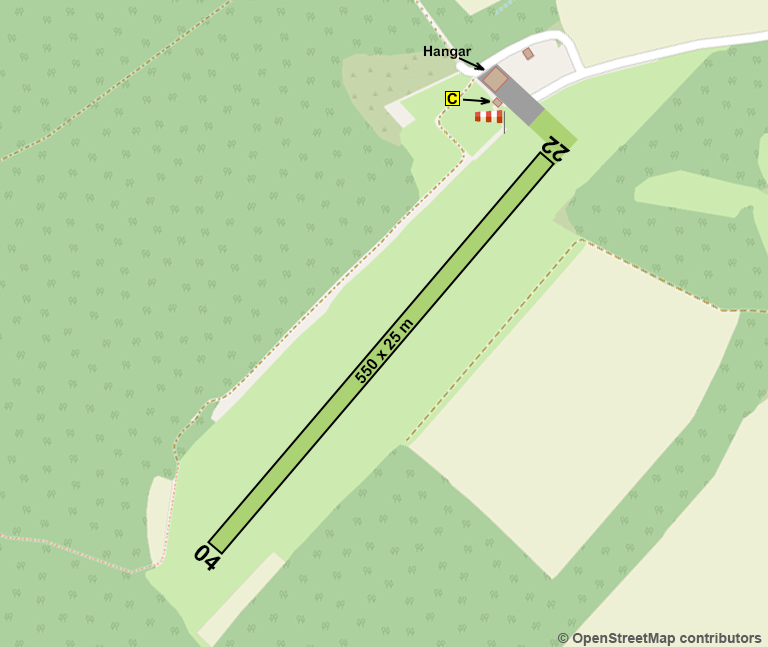
<style>
.page{position:relative;width:768px;height:647px;background:#add19e}
.page>*{position:absolute;margin:0}
.t1{font:14px "Arial-BoldMT";color:#000000}
.t2{font:24px "Arial-BoldMT";color:#000000}
.t3{font:16px "Arial-BoldMT";color:#000000}
.t4{font:14px "Arial-BoldMT";color:#5c5c5c}
</style>
<div class="page">
<p class="t1" style="left:423px;top:45px;width:49px;height:14px;rotate:-1deg">Hangar</p>
<p class="t2" style="left:542px;top:135px;width:29px;height:27px;rotate:-141deg">22</p>
<p class="t3" style="left:354px;top:319px;width:60px;height:65px;rotate:-50deg">550 x 25 m</p>
<p class="t2" style="left:194px;top:545px;width:27px;height:26px;rotate:41deg">04</p>
<p class="t4" style="left:557px;top:633px;width:205px;height:13px">© OpenStreetMap contributors</p>
</div>
